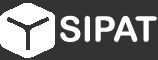
<style>
.page{position:relative;width:158px;height:60px;background:#333333}
.page>*{position:absolute;margin:0}
.t1{font:35px "ArialRoundedMTBold";color:#ffffff}
</style>
<div class="page">
<p class="t1" style="left:60px;top:15px;width:97px;height:27px">SIPAT</p>
</div>
